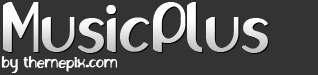
<style>
.page{position:relative;width:318px;height:75px;background:#333333}
.page>*{position:absolute;margin:0}
.t1{font:53px "Olivia";font-weight:bold}
.t2{font:12px "Olivia";color:#fdfdfd;font-weight:bold}
.t3{font:12px "OliJo-Bold";color:#fdfdfd;font-weight:bold}
</style>
<div class="page">
<p class="t1" style="left:3px;top:2px;width:265px;height:51px">MusicPlus</p>
<p class="t2" style="left:1px;top:56px;width:117px;height:17px">by themepix<span class="t3">.</span>com</p>
</div>
